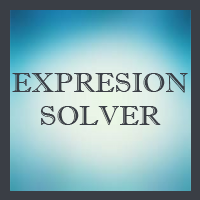
<style>
.page{position:relative;width:200px;height:200px;background:#3a3e45}
.page>*{position:absolute;margin:0}
.t1{font:28px "ImprintMT-Shadow";color:#3a3e45}
</style>
<div class="page">
<p class="t1" style="left:12px;top:73px;width:176px;height:52px;text-align:center">EXPRESION<br>SOLVER</p>
</div>
